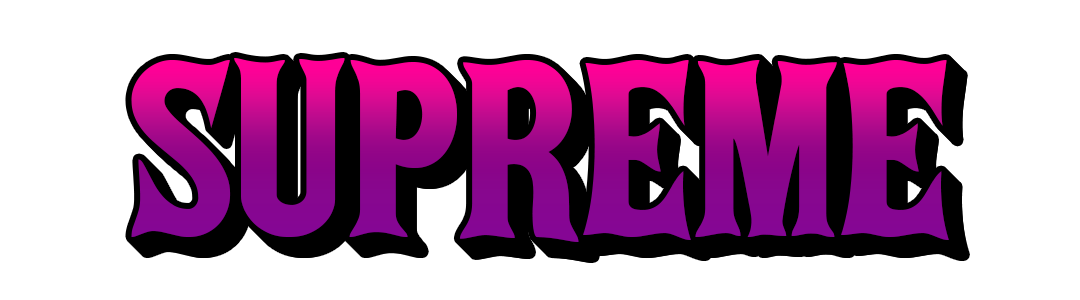
<style>
.page{position:relative;width:1080px;height:300px;background:#ffffff}
.page>*{position:absolute;margin:0}
.t1{font:225.3px "akaPosse"}
</style>
<div class="page">
<p class="t1" style="left:131px;top:58px;width:818px;height:184px">SUPREME</p>
<p class="t1" style="left:132px;top:59px;width:818px;height:184px">SUPREME</p>
<p class="t1" style="left:133px;top:60px;width:818px;height:184px">SUPREME</p>
<p class="t1" style="left:134px;top:61px;width:818px;height:184px">SUPREME</p>
<p class="t1" style="left:135px;top:62px;width:818px;height:184px">SUPREME</p>
<p class="t1" style="left:136px;top:63px;width:818px;height:184px">SUPREME</p>
<p class="t1" style="left:137px;top:64px;width:818px;height:184px">SUPREME</p>
</div>
